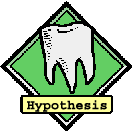
<style>
.page{position:relative;width:132px;height:131px;background:#ffffff}
.page>*{position:absolute;margin:0}
.t1{font:13.5px "Courier-Bold";color:#000000}
</style>
<div class="page">
<p class="t1" style="left:27px;top:100px;width:80px;height:12px">Hypothesis</p>
</div>
